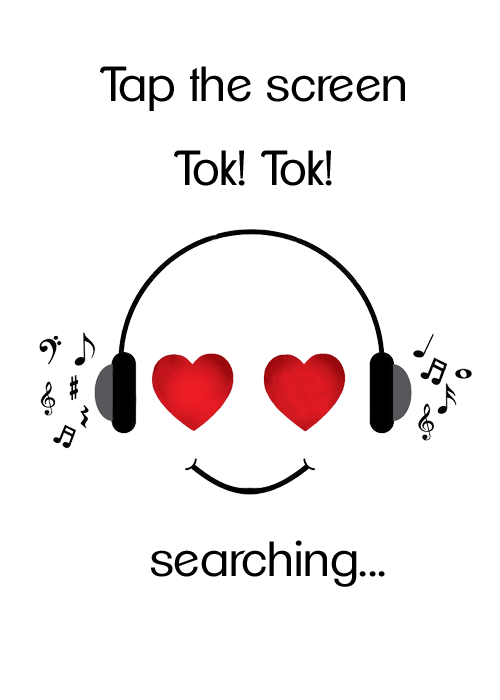
<style>
.page{position:relative;width:500px;height:700px;background:#ffffff}
.page>*{position:absolute;margin:0}
.t1{font:48px "ClementePDag-Book";color:#000000}
</style>
<div class="page">
<p class="t1" style="left:100px;top:66px;width:305px;height:120px;text-align:center">Tap the screen<br>Tok! Tok!</p>
<p class="t1" style="left:151px;top:540px;width:234px;height:47px">searching...</p>
</div>
